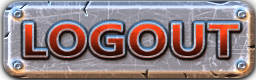
<style>
.page{position:relative;width:256px;height:80px}
.page>*{position:absolute;margin:0}
.t1{font:46.8px "SegoeUI-Bold";scale:1.17 1}
</style>
<div class="page">
<p class="t1" style="left:24px;top:23px;width:215px;height:34px">LOGOUT</p>
</div>
